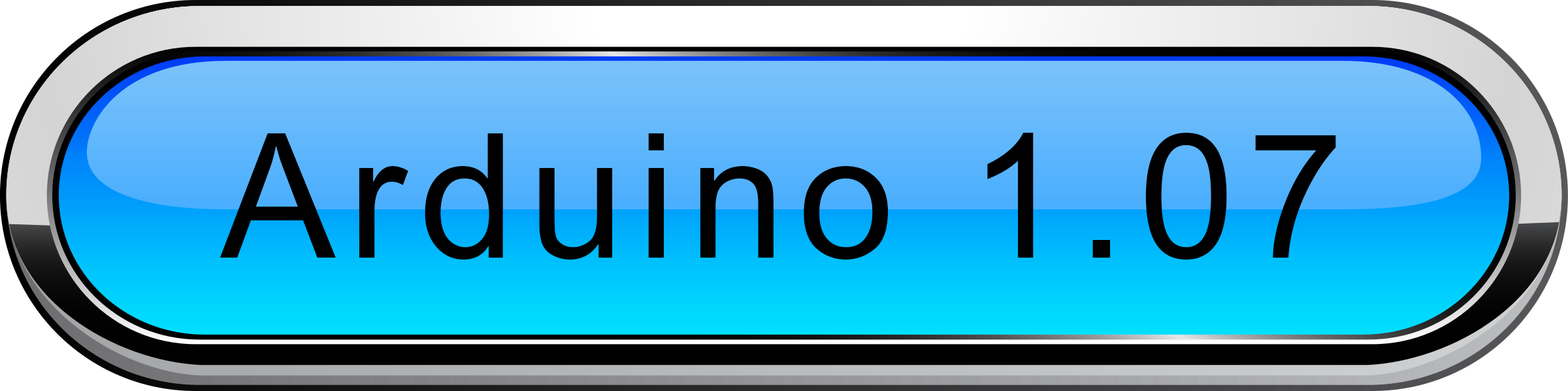
<style>
.page{position:relative;width:1568px;height:391px}
.page>*{position:absolute;margin:0}
.t1{font:172.9px "DokChampa";letter-spacing:0.075em;color:#000000}
</style>
<div class="page">
<p class="t1" style="left:220px;top:132px;width:1116px;height:127px">Arduino 1.07</p>
</div>
